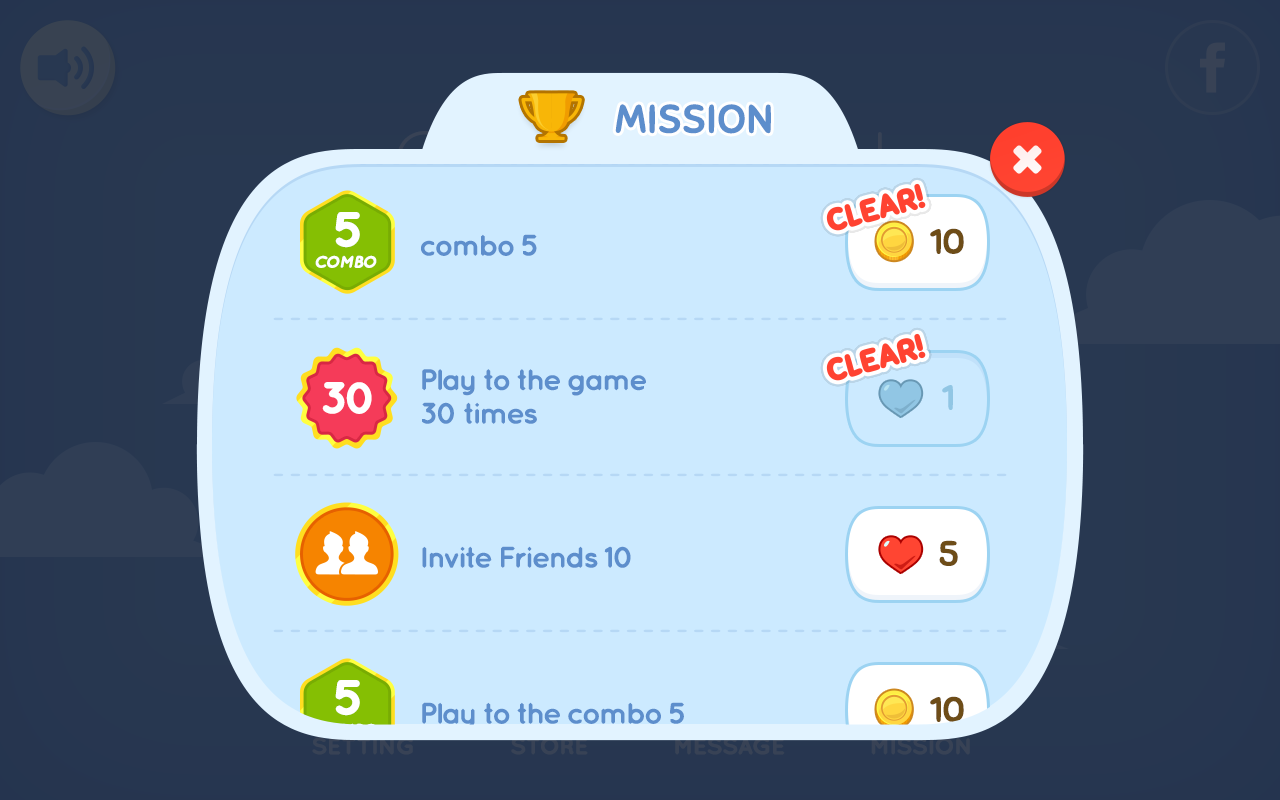
<style>
.page{position:relative;width:1280px;height:800px;background:#cceaff}
.page>*{position:absolute;margin:0}
.t1{font:38.8px "Sniglet-Regular";letter-spacing:-0.025em;color:#5d8ecc;text-transform:uppercase;font-weight:bold;scale:1.06 1}
.t2{font:48px "QuicksandBold-Regular";letter-spacing:-0.1em;color:#ffffff;text-transform:uppercase;font-weight:bold;scale:1.06 1}
.t3{font:34.2px "Sniglet-Regular";letter-spacing:-0.025em;color:#6e4d18;font-weight:bold;scale:1.05 1}
.t4{font:29.6px "QuicksandBold-Regular";letter-spacing:-0.075em;color:#5d8ecc;scale:1.05 1}
.t5{font:16.3px "QuicksandBoldOblique-Regular";letter-spacing:-0.1em;color:#ffffff;text-transform:uppercase;font-weight:bold;scale:1.06 1}
.t6{font:29.6px/33.6px "QuicksandBold-Regular";letter-spacing:-0.075em;color:#5d8ecc;scale:1.05 1}
.t7{font:43.3px "QuicksandBold-Regular";letter-spacing:-0.1em;color:#ffffff;text-transform:uppercase;font-weight:bold;scale:1.06 1}
.t8{font:34.2px "Sniglet-Regular";letter-spacing:-0.075em;color:#91c6e4;font-weight:bold;scale:1.05 1}
.t9{font:34.2px "Sniglet-Regular";letter-spacing:-0.075em;color:#6e4d18;font-weight:bold;scale:1.05 1}
</style>
<div class="page">
<p class="t1" style="left:615px;top:104px;width:156px;height:30px">MISSION</p>
<p class="t2" style="left:335px;top:212px;width:25px;height:36px">5</p>
<p class="t3" style="left:930px;top:228px;width:34px;height:26px">10</p>
<p class="t4" style="left:421px;top:234px;width:116px;height:22px">combo 5</p>
<p class="t5" style="left:315px;top:255px;width:62px;height:13px">COMBO</p>
<p class="t6" style="left:422px;top:369px;width:224px;height:55px">Play to the game<br>30 times</p>
<p class="t7" style="left:322px;top:382px;width:50px;height:32px">30</p>
<p class="t8" style="left:942px;top:385px;width:11px;height:25px">1</p>
<p class="t9" style="left:939px;top:540px;width:19px;height:26px">5</p>
<p class="t4" style="left:422px;top:546px;width:209px;height:22px">Invite Friends 10</p>
<p class="t2" style="left:335px;top:680px;width:25px;height:36px">5</p>
<p class="t4" style="left:422px;top:702px;width:262px;height:27px">Play to the combo 5</p>
<p class="t3" style="left:930px;top:696px;width:34px;height:26px">10</p>
</div>
